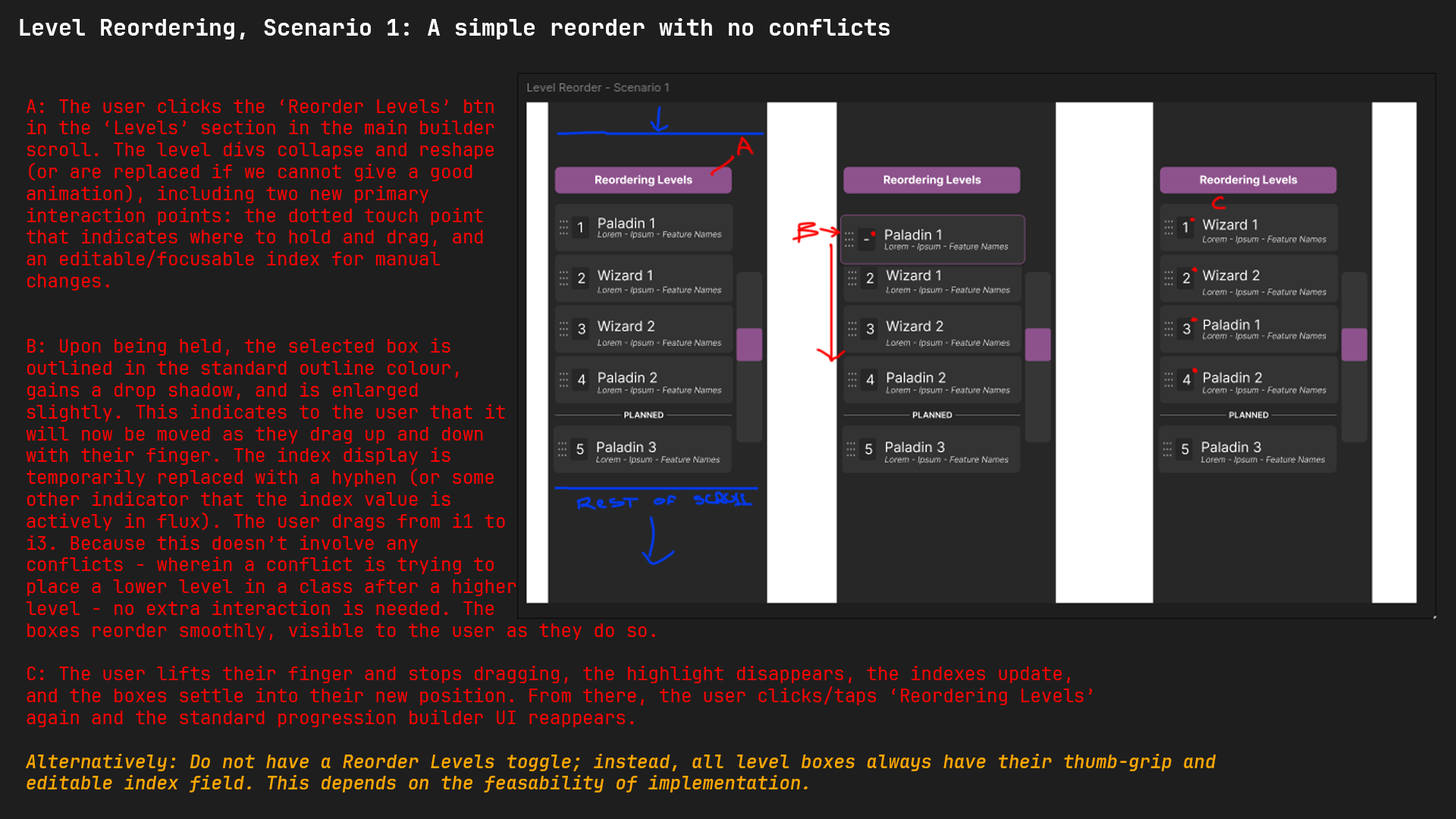
<style>
.page{position:relative;width:1456px;height:819px;background:#1e1e1e}
.page>*{position:absolute;margin:0}
.t1{font:22.7px "JetBrainsMonoNF-Bold";color:#ffffff}
.t2{font:18.2px "JetBrainsMonoNF-Light";color:#fe0101}
.t3{font:18.2px "JetBrainsMonoNF-SemiBoldItalic";color:#fea801}
</style>
<div class="page">
<p class="t1" style="left:20px;top:18px;width:870px;height:21px">Level Reordering, Scenario 1: A simple reorder with no conflicts</p>
<p class="t2" style="left:26px;top:99px;width:1190px;height:693px">A: The user clicks the ‘Reorder Levels’ btn<br>in the ‘Levels’ section in the main builder<br>scroll. The level divs collapse and reshape<br>(or are replaced if we cannot give a good<br>animation), including two new primary<br>interaction points: the dotted touch point<br>that indicates where to hold and drag, and<br>an editable/focusable index for manual<br>changes.<br><br><br>B: Upon being held, the selected box is<br>outlined in the standard outline colour,<br>gains a drop shadow, and is enlarged<br>slightly. This indicates to the user that it<br>will now be moved as they drag up and down<br>with their finger. The index display is<br>temporarily replaced with a hyphen (or some<br>other indicator that the index value is<br>actively in flux). The user drags from i1 to<br>i3. Because this doesn’t involve any<br>conflicts - wherein a conflict is trying to<br>place a lower level in a class after a higher<br>level - no extra interaction is needed. The<br>boxes reorder smoothly, visible to the user as they do so.<br><br>C: The user lifts their finger and stops dragging, the highlight disappears, the indexes update,<br>and the boxes settle into their new position. From there, the user clicks/taps ‘Reordering Levels’<br>again and the standard progression builder UI reappears.<br><br><span class="t3">Alternatively: Do not have a Reorder Levels toggle; instead, all level boxes always have their thumb-grip and<br>editable index field. This depends on the feasability of implementation.</span></p>
</div>
